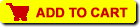
<style>
.page{position:relative;width:140px;height:27px;background:#fcff00}
.page>*{position:absolute;margin:0}
.t1{font:12.8px "Arial-BoldMT";color:#cc0000;text-transform:uppercase;font-weight:bold}
</style>
<div class="page">
<p class="t1" style="left:36px;top:7px;width:92px;height:11px">Add To Cart</p>
</div>
